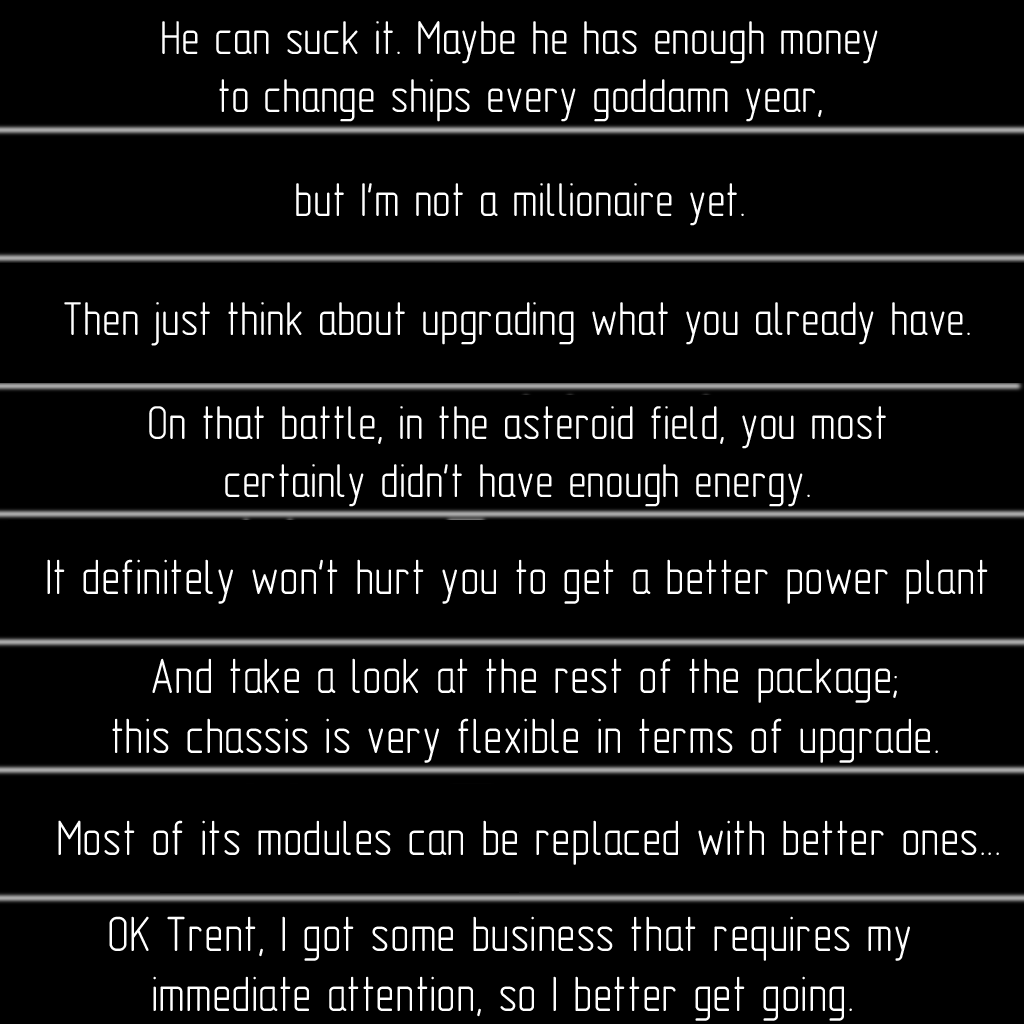
<style>
.page{position:relative;width:1024px;height:1024px;background:#000000}
.page>*{position:absolute;margin:0}
.t1{font:48px "GOST-2.304-81typeA";color:#ffffff}
.t2{font:50px "GOST-2.304-81typeA";color:#ffffff}
</style>
<div class="page">
<p class="t1" style="left:162px;top:21px;width:716px;height:101px;text-align:center">He can suck it. Maybe he has enough money<br>to change ships every goddamn year,</p>
<p class="t1" style="left:296px;top:183px;width:448px;height:43px">but I'm not a millionaire yet.</p>
<p class="t1" style="left:64px;top:302px;width:906px;height:44px">Then just think about upgrading what you already have.</p>
<p class="t1" style="left:149px;top:406px;width:737px;height:101px;text-align:center">On that battle, in the asteroid field, you most<br>certainly didn't have enough energy.</p>
<p class="t2" style="left:47px;top:559px;width:941px;height:45px">It definitely won't hurt you to get a better power plant</p>
<p class="t2" style="left:112px;top:658px;width:826px;height:105px;text-align:center">And take a look at the rest of the package;<br>this chassis is very flexible in terms of upgrade.</p>
<p class="t2" style="left:58px;top:820px;width:941px;height:45px">Most of its modules can be replaced with better ones...</p>
<p class="t2" style="left:109px;top:916px;width:801px;height:105px;text-align:center">OK Trent, I got some business that requires my<br>immediate attention, so I better get going.</p>
</div>
